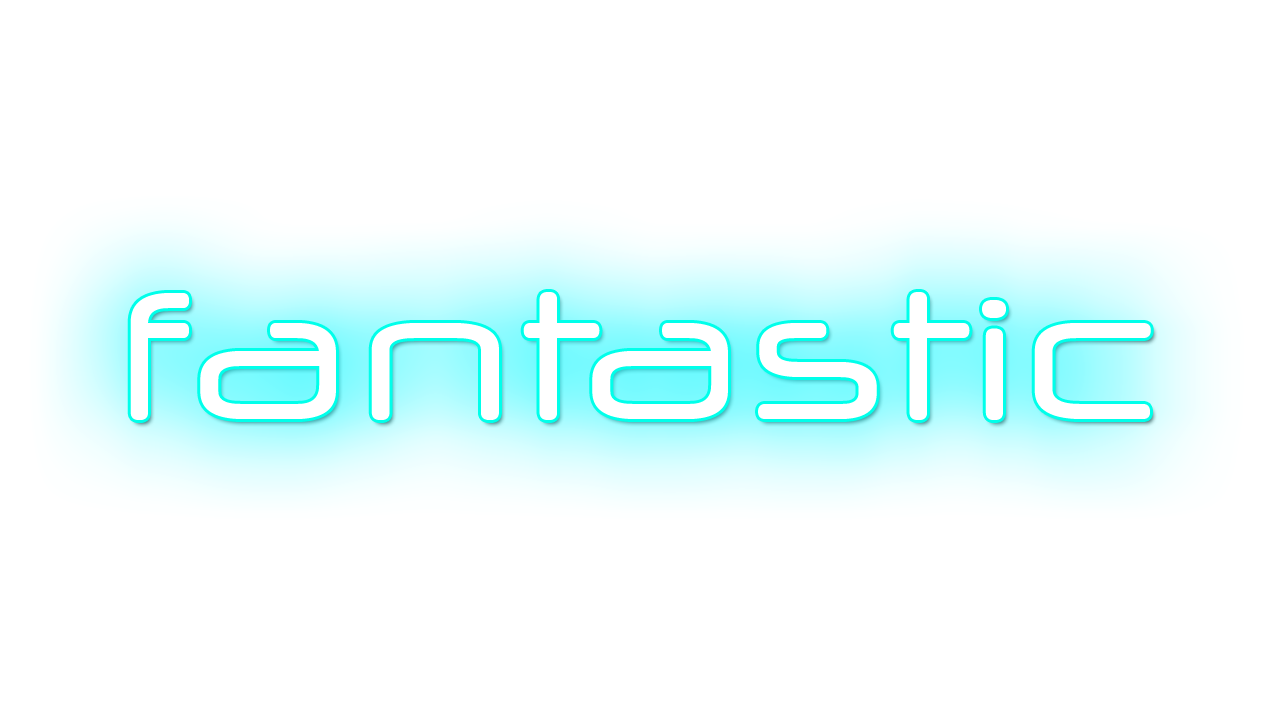
<style>
.page{position:relative;width:1280px;height:720px;background:#ffffff}
.page>*{position:absolute;margin:0}
.t1{font:180px "NeuropolXFree";color:#ffffff}
</style>
<div class="page">
<p class="t1" style="left:130px;top:292px;width:1021px;height:128px">fantastic</p>
</div>
